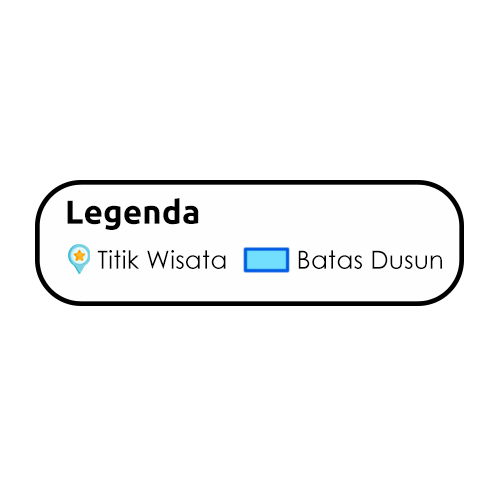
<style>
.page{position:relative;width:500px;height:500px;background:#ffffff}
.page>*{position:absolute;margin:0}
.t1{font:33.3px "Ubuntu-Bold";color:#000000}
.t2{font:25px "CenturyGothic";color:#000000}
</style>
<div class="page">
<p class="t1" style="left:67px;top:198px;width:132px;height:32px">Legenda</p>
<p class="t2" style="left:97px;top:250px;width:129px;height:19px">Titik Wisata</p>
<p class="t2" style="left:298px;top:250px;width:144px;height:19px">Batas Dusun</p>
</div>
